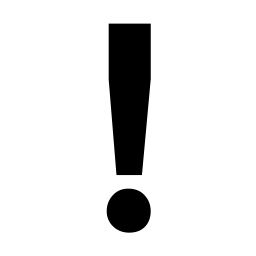
<style>
.page{position:relative;width:256px;height:256px;background:#ffffff}
.page>*{position:absolute;margin:0}
.t1{font:250px "HGSSoeiKakugothicUB";color:#000000}
</style>
<div class="page">
<p class="t1" style="left:106px;top:23px;width:45px;height:210px">!</p>
</div>
